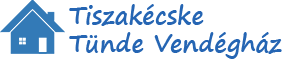
<style>
.page{position:relative;width:282px;height:59px;background:#ffffff}
.page>*{position:absolute;margin:0}
.t1{font:24px "SegoePrint-Bold";color:#2565b3}
</style>
<div class="page">
<p class="t1" style="left:69px;top:4px;width:213px;height:55px">Tiszakécske<br>Tünde Vendégház</p>
</div>
